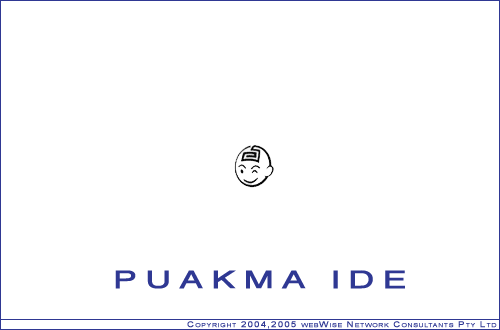
<style>
.page{position:relative;width:500px;height:330px;background:#ffffff}
.page>*{position:absolute;margin:0}
.t1{font:24px "Helvetica";letter-spacing:0.2em;color:#2f3893;font-weight:bold;scale:1.5 1}
.t2{font:8px "ArialMT";letter-spacing:0.1em;color:#2f3893;font-variant:small-caps;font-weight:bold;scale:1.2 1}
</style>
<div class="page">
<p class="t1" style="left:115px;top:270px;width:290px;height:19px">PUAKMA IDE</p>
<p class="t2" style="left:187px;top:321px;width:310px;height:8px">Copyright 2004,2005 webWise Network Consultants Pty Ltd</p>
</div>
